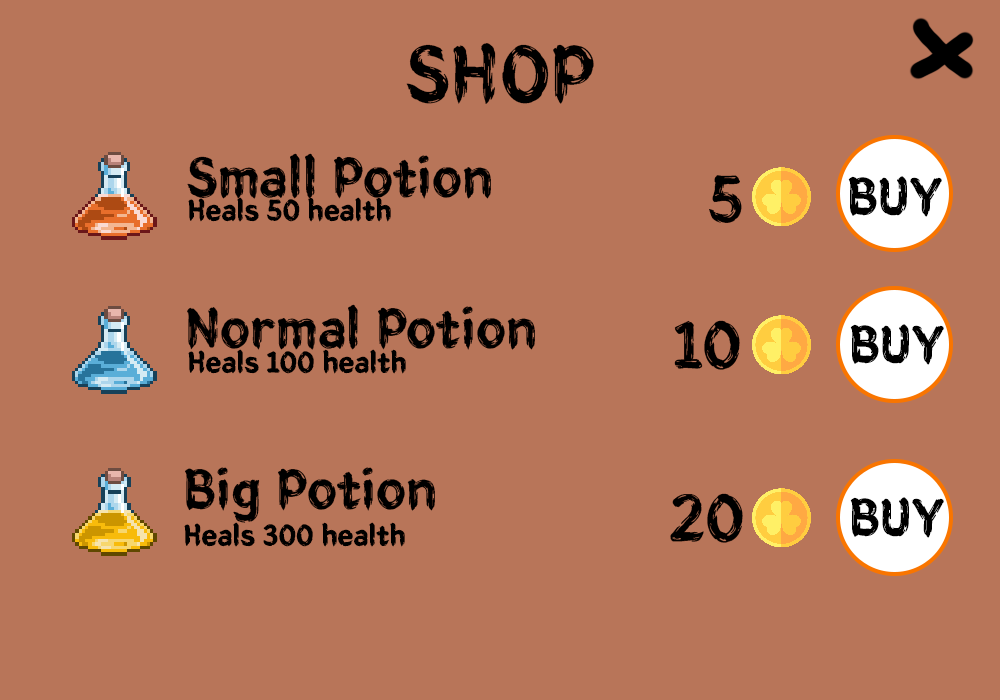
<style>
.page{position:relative;width:1000px;height:700px;background:#b87559}
.page>*{position:absolute;margin:0}
.t1{font:78px "BMEuljiro10yearslater";color:#000000}
.t2{font:54.4px "BMEuljiro10yearslater";color:#000000}
.t3{font:64.7px "BMEuljiro10yearslater";color:#000000}
.t4{font:51px "BMEuljiro10yearslater";color:#000000}
.t5{font:28.7px "BMEuljiro10yearslater";color:#000000}
</style>
<div class="page">
<p class="t1" style="left:406px;top:43px;width:188px;height:61px">SHOP</p>
<p class="t2" style="left:187px;top:153px;width:304px;height:46px">Small Potion</p>
<p class="t3" style="left:709px;top:175px;width:33px;height:48px">5</p>
<p class="t4" style="left:848px;top:176px;width:94px;height:41px">BUY</p>
<p class="t5" style="left:188px;top:197px;width:203px;height:25px">Heals 50 health</p>
<p class="t2" style="left:187px;top:304px;width:348px;height:46px">Normal Potion</p>
<p class="t3" style="left:674px;top:320px;width:66px;height:50px">10</p>
<p class="t4" style="left:850px;top:324px;width:94px;height:41px">BUY</p>
<p class="t5" style="left:188px;top:349px;width:218px;height:25px">Heals 100 health</p>
<p class="t2" style="left:185px;top:467px;width:250px;height:56px">Big Potion</p>
<p class="t3" style="left:670px;top:493px;width:73px;height:50px">20</p>
<p class="t4" style="left:850px;top:497px;width:94px;height:41px">BUY</p>
<p class="t5" style="left:184px;top:522px;width:221px;height:25px">Heals 300 health</p>
</div>
